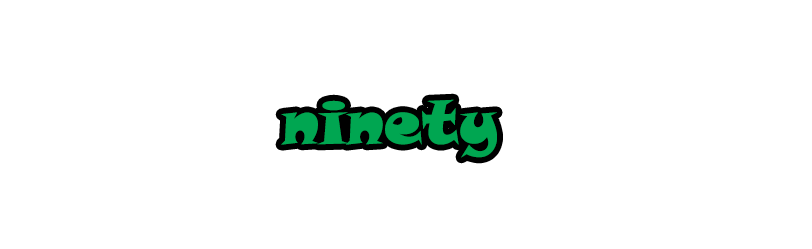
<style>
.page{position:relative;width:812px;height:249px;background:#ffffff}
.page>*{position:absolute;margin:0}
.t1{font:60px "SnapITC-Regular";color:#00a651}
</style>
<div class="page">
<p class="t1" style="left:281px;top:99px;width:216px;height:59px">ninety</p>
</div>
